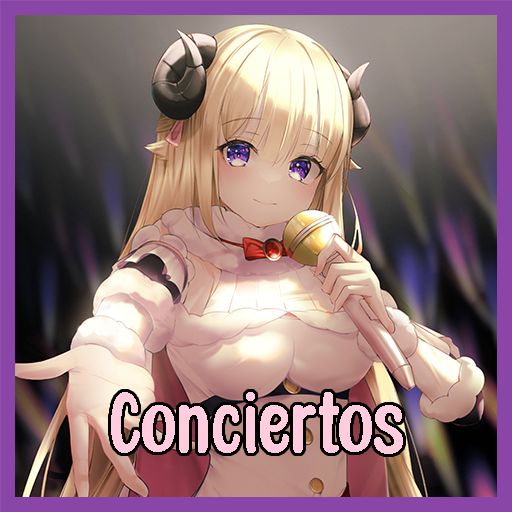
<style>
.page{position:relative;width:512px;height:512px}
.page>*{position:absolute;margin:0}
.t1{font:94.7px "HoneyNotes-Regular";color:#ffcddd}
</style>
<div class="page">
<p class="t1" style="left:111px;top:392px;width:292px;height:62px">Conciertos</p>
</div>
